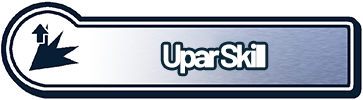
<style>
.page{position:relative;width:363px;height:100px;background:#ffffff}
.page>*{position:absolute;margin:0}
.t1{font:32px "Barlow-Bold";letter-spacing:-0.1em;color:#ffffff}
</style>
<div class="page">
<p class="t1" style="left:163px;top:43px;width:103px;height:31px">Upar Skill</p>
</div>
